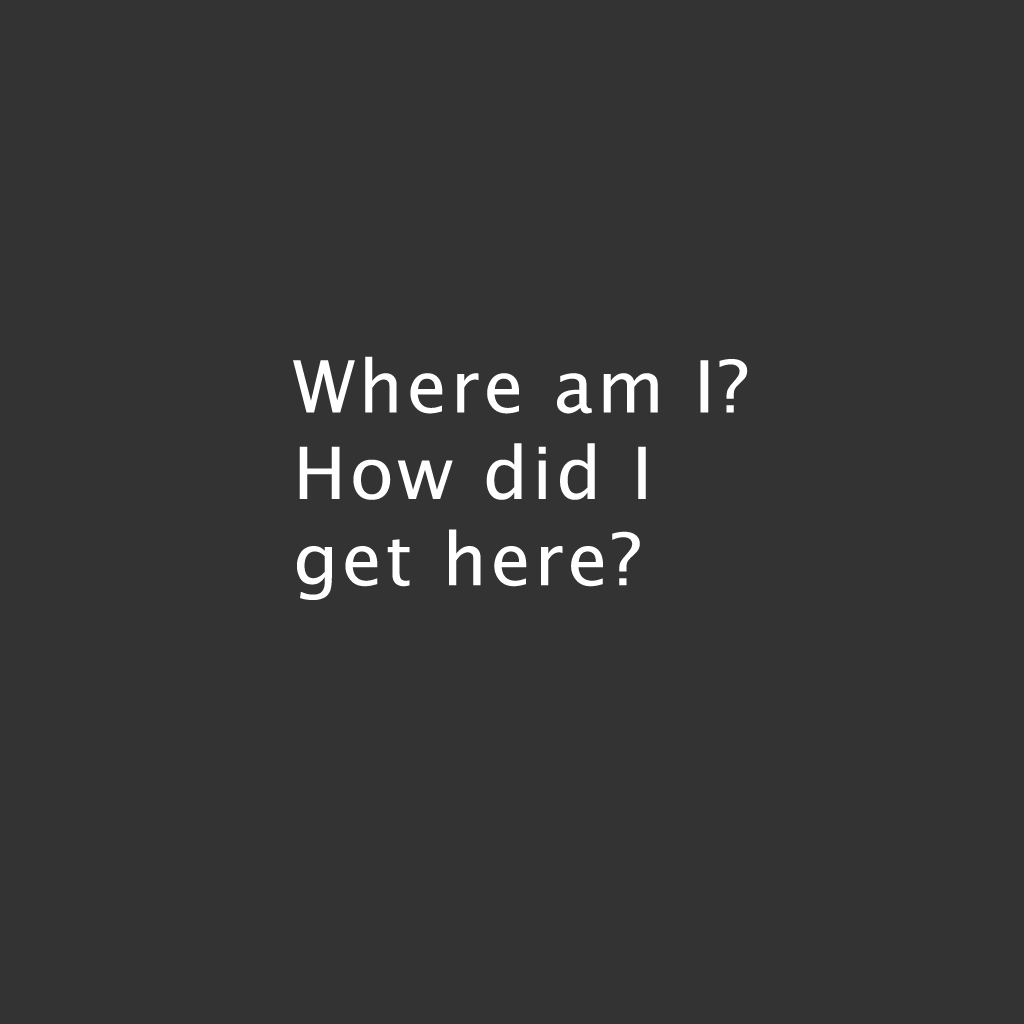
<style>
.page{position:relative;width:1024px;height:1024px;background:#333333}
.page>*{position:absolute;margin:0}
.t1{font:72px "LucidaSans";letter-spacing:0.05em;color:#ffffff}
</style>
<div class="page">
<p class="t1" style="left:293px;top:356px;width:455px;height:244px">Where am I? <br>How did I <br>get here?</p>
</div>
